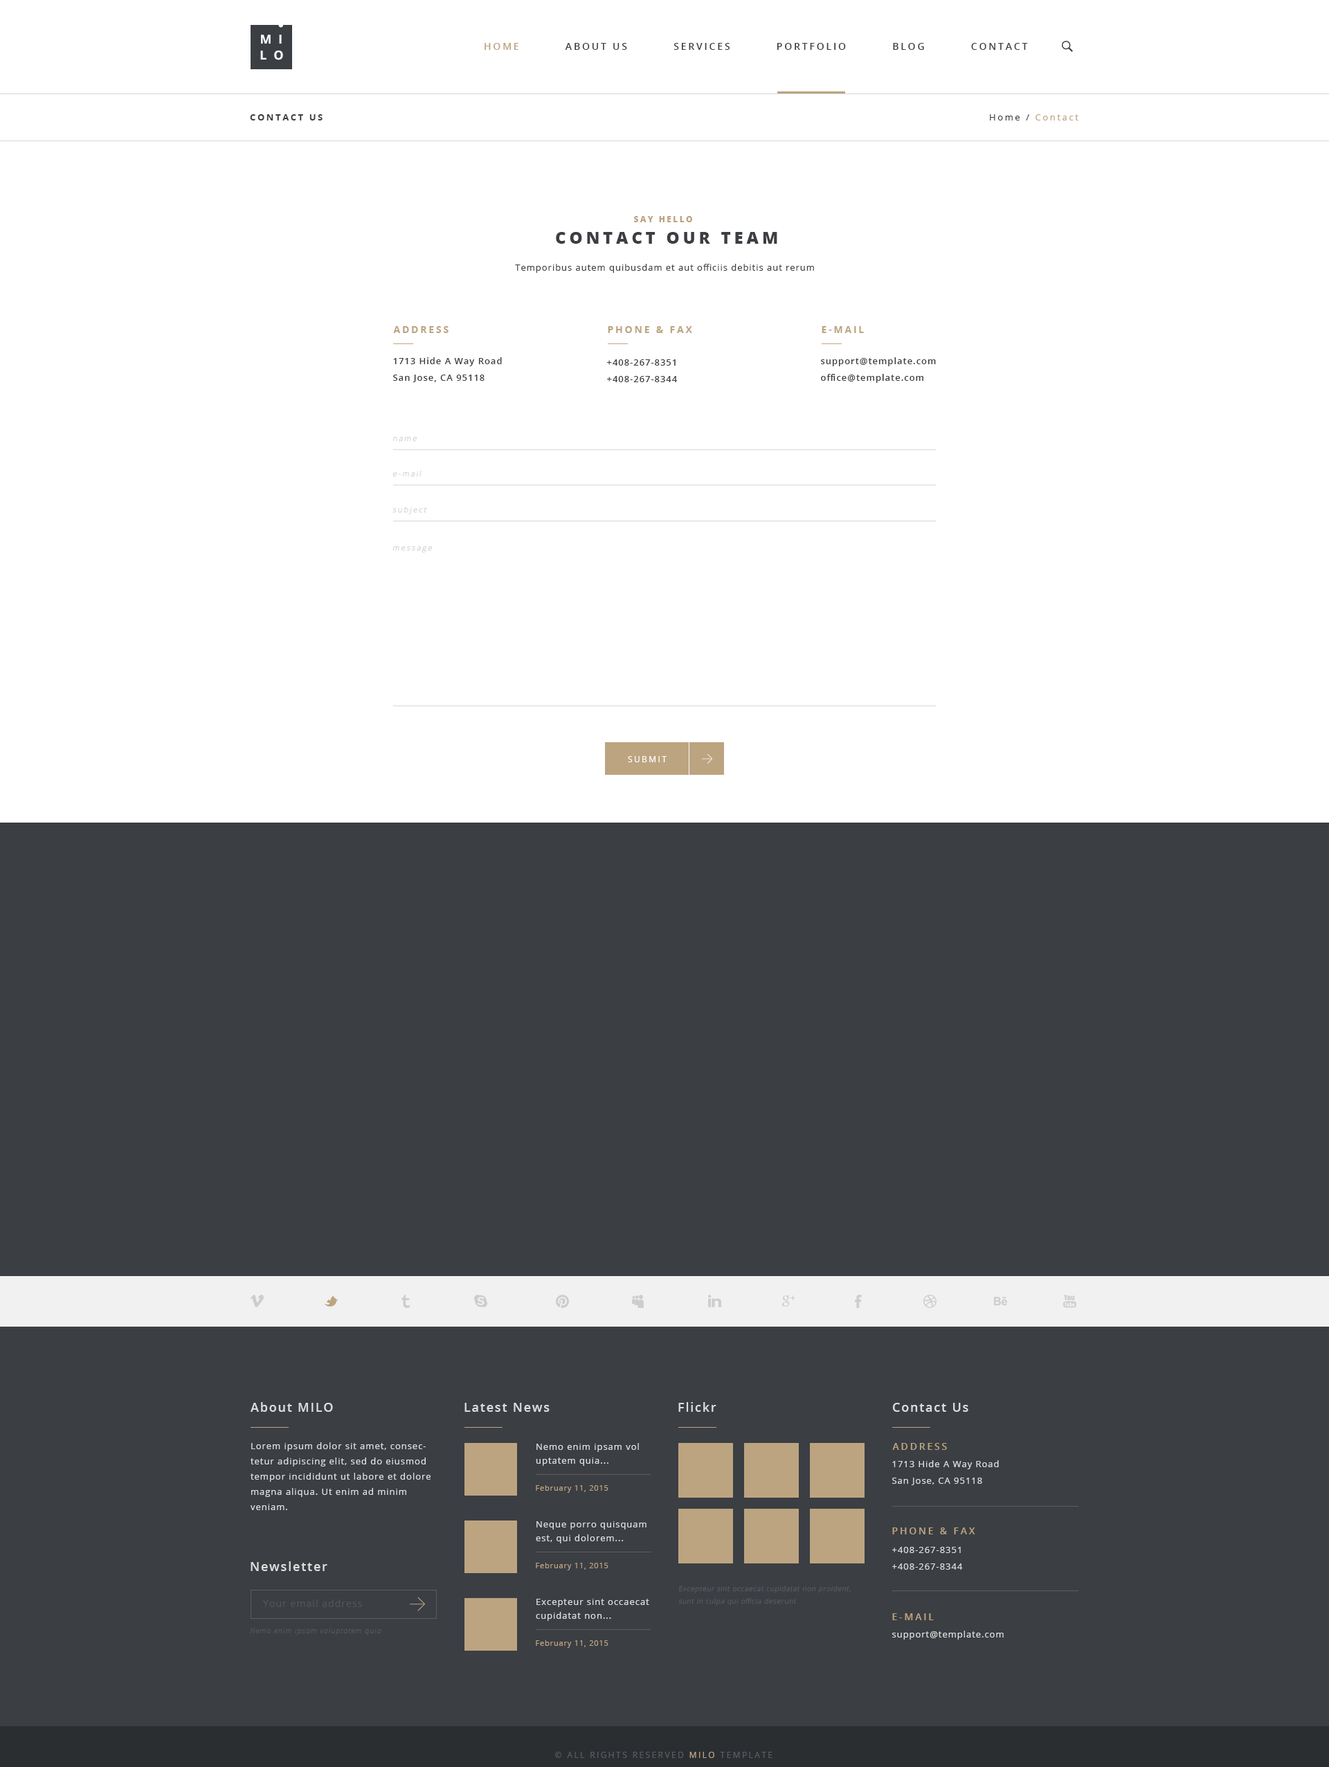
<style>
.page{position:relative;width:1329px;height:1767px;background:#ffffff}
.page>*{position:absolute;margin:0}
.t1{font:12.5px "OpenSans-Bold";letter-spacing:0.55em;color:#ffffff;text-transform:uppercase}
.t2{font:9.7px "OpenSans-Semibold";letter-spacing:0.2em;color:#3b3e43;text-transform:uppercase}
.t3{font:9.7px "OpenSans-Semibold";letter-spacing:0.2em;color:#bca480;text-transform:uppercase}
.t4{font:9px "OpenSans-Bold";letter-spacing:0.2em;color:#3b3e43;text-transform:uppercase}
.t5{font:9px "OpenSans";letter-spacing:0.2em;color:#bca480}
.t6{font:9px "OpenSans";letter-spacing:0.2em;color:#3b3e43}
.t7{font:8.3px "OpenSans-Extrabold";letter-spacing:0.2em;color:#bca480;text-transform:uppercase}
.t8{font:16.6px "OpenSans-Extrabold";letter-spacing:0.2em;color:#3b3e43;text-transform:uppercase}
.t9{font:9px "OpenSans";letter-spacing:0.075em;color:#3b3e43}
.t10{font:9.7px "OpenSans-Bold";letter-spacing:0.2em;color:#bca480;text-transform:uppercase}
.t11{font:9px/16.6px "OpenSans-Semibold";letter-spacing:0.075em;color:#3b3e43}
.t12{font:7.6px "OpenSans-Light";letter-spacing:0.2em;color:#d2d2d2;font-style:italic}
.t13{font:8.3px "OpenSans";letter-spacing:0.2em;color:#ffffff;text-transform:uppercase}
.t14{font:12.5px "OpenSans-Semibold";letter-spacing:0.1em;color:#dddddd}
.t15{font:9px/15.2px "OpenSans";letter-spacing:0.075em;color:#dddddd}
.t16{font:9px/13.8px "OpenSans";letter-spacing:0.075em;color:#dddddd}
.t17{font:9px/16.6px "OpenSans";letter-spacing:0.075em;color:#dddddd}
.t18{font:7.6px "OpenSans";letter-spacing:0.075em;color:#bca480}
.t19{font:9px/16.6px "OpenSans-Semibold";letter-spacing:0.075em;color:#dddddd}
.t20{font:6.9px/12.5px "OpenSans-Light";letter-spacing:0.075em;color:#585c62;font-style:italic}
.t21{font:9.7px "OpenSans";letter-spacing:0.075em;color:#505459}
.t22{font:7.6px "OpenSansLight-Italic";letter-spacing:0.075em;color:#53575d}
.t23{font:9px "OpenSans";letter-spacing:0.075em;color:#dddddd}
.t24{font:8.3px "OpenSans";letter-spacing:0.2em;color:#585c62;text-transform:uppercase}
.t25{font:8.3px "OpenSans";letter-spacing:0.2em;color:#bca480;text-transform:uppercase}
</style>
<div class="page">
<p class="t1" style="left:261px;top:35px;width:21px;height:9px">mi</p>
<p class="t1" style="left:260px;top:51px;width:23px;height:9px">lo</p>
<p class="t2" style="left:485px;top:43px;width:543px;height:7px"><span class="t3">Home          </span>About Us          Services          Portfolio          Blog          Contact</p>
<p class="t4" style="left:250px;top:114px;width:73px;height:6px">contact us</p>
<p class="t5" style="left:990px;top:114px;width:89px;height:6px"><span class="t6">Home / </span>Contact</p>
<p class="t7" style="left:634px;top:216px;width:58px;height:6px">say hello</p>
<p class="t8" style="left:556px;top:232px;width:221px;height:12px">contact our team</p>
<p class="t9" style="left:515px;top:264px;width:299px;height:9px">Temporibus autem quibusdam et aut officiis debitis aut rerum</p>
<p class="t10" style="left:393px;top:326px;width:56px;height:7px">Address</p>
<p class="t10" style="left:608px;top:326px;width:84px;height:7px">Phone &amp; Fax</p>
<p class="t10" style="left:822px;top:326px;width:42px;height:7px">E-mail</p>
<p class="t11" style="left:393px;top:357px;width:109px;height:25px">1713 Hide A Way Road<br>San Jose, CA 95118</p>
<p class="t11" style="left:607px;top:359px;width:70px;height:23px">+408-267-8351<br>+408-267-8344</p>
<p class="t11" style="left:821px;top:357px;width:115px;height:26px">support@template.com<br>office@template.com</p>
<p class="t12" style="left:393px;top:436px;width:24px;height:6px">name</p>
<p class="t12" style="left:393px;top:470px;width:29px;height:7px">e-mail</p>
<p class="t12" style="left:393px;top:506px;width:34px;height:8px">subject</p>
<p class="t12" style="left:393px;top:546px;width:39px;height:6px">message</p>
<p class="t13" style="left:628px;top:756px;width:39px;height:6px">submit</p>
<p class="t14" style="left:251px;top:1402px;width:82px;height:10px">About MILO</p>
<p class="t14" style="left:465px;top:1403px;width:85px;height:9px">Latest News</p>
<p class="t14" style="left:678px;top:1402px;width:39px;height:10px">Flickr</p>
<p class="t14" style="left:892px;top:1403px;width:77px;height:9px">Contact Us</p>
<p class="t15" style="left:251px;top:1442px;width:180px;height:68px">Lorem ipsum dolor sit amet, consectetur adipiscing elit, sed do eiusmod tempor incididunt ut labore et dolore magna aliqua. Ut enim ad minim veniam.</p>
<p class="t16" style="left:536px;top:1443px;width:103px;height:23px">Nemo enim ipsam vol uptatem quia...</p>
<p class="t3" style="left:892px;top:1443px;width:55px;height:7px">Address</p>
<p class="t17" style="left:892px;top:1460px;width:107px;height:25px">1713 Hide A Way Road<br>San Jose, CA 95118</p>
<p class="t18" style="left:536px;top:1485px;width:73px;height:8px">February 11, 2015</p>
<p class="t16" style="left:536px;top:1521px;width:111px;height:22px">Neque porro quisquam est, qui dolorem...</p>
<p class="t3" style="left:892px;top:1527px;width:83px;height:7px">Phone &amp; Fax</p>
<p class="t17" style="left:892px;top:1547px;width:71px;height:22px"><span class="t19"><br></span>+408-267-8351<br>+408-267-8344</p>
<p class="t14" style="left:251px;top:1561px;width:76px;height:10px">Newsletter</p>
<p class="t18" style="left:536px;top:1563px;width:73px;height:7px">February 11, 2015</p>
<p class="t20" style="left:678px;top:1585px;width:173px;height:20px">Excepteur sint occaecat cupidatat non proident, sunt in culpa qui officia deserunt</p>
<p class="t21" style="left:263px;top:1599px;width:99px;height:8px">Your email address</p>
<p class="t16" style="left:536px;top:1599px;width:113px;height:22px">Excepteur sint occaecat cupidatat non...</p>
<p class="t3" style="left:892px;top:1613px;width:42px;height:7px">E-mail</p>
<p class="t22" style="left:250px;top:1628px;width:131px;height:7px">Nemo enim ipsam voluptatem quia</p>
<p class="t23" style="left:892px;top:1630px;width:112px;height:9px">support@template.com</p>
<p class="t18" style="left:536px;top:1640px;width:73px;height:8px">February 11, 2015</p>
<p class="t24" style="left:555px;top:1752px;width:218px;height:6px">© All Rights Reserved <span class="t25">MILO</span> template</p>
</div>
